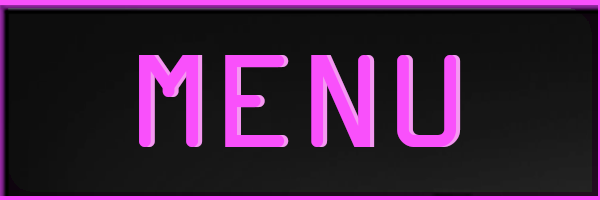
<style>
.page{position:relative;width:600px;height:200px}
.page>*{position:absolute;margin:0}
.t1{font:142px "OCRAExtended";color:#f950fb}
</style>
<div class="page">
<p class="t1" style="left:139px;top:55px;width:318px;height:92px">MENU</p>
<p class="t1" style="left:143px;top:55px;width:318px;height:92px">MENU</p>
</div>
